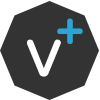
<style>
.page{position:relative;width:100px;height:100px;background:#333333}
.page>*{position:absolute;margin:0}
.t1{font:48.7px "VarelaRound-Regular";letter-spacing:-0.02em;color:#29a6d3;font-weight:bold}
.t2{font:49.3px "VarelaRound-Regular";letter-spacing:-0.02em;color:#ffffff;font-weight:bold}
</style>
<div class="page">
<p class="t1" style="left:57px;top:18px;width:26px;height:26px">+</p>
<p class="t2" style="left:27px;top:39px;width:34px;height:38px">V</p>
</div>
